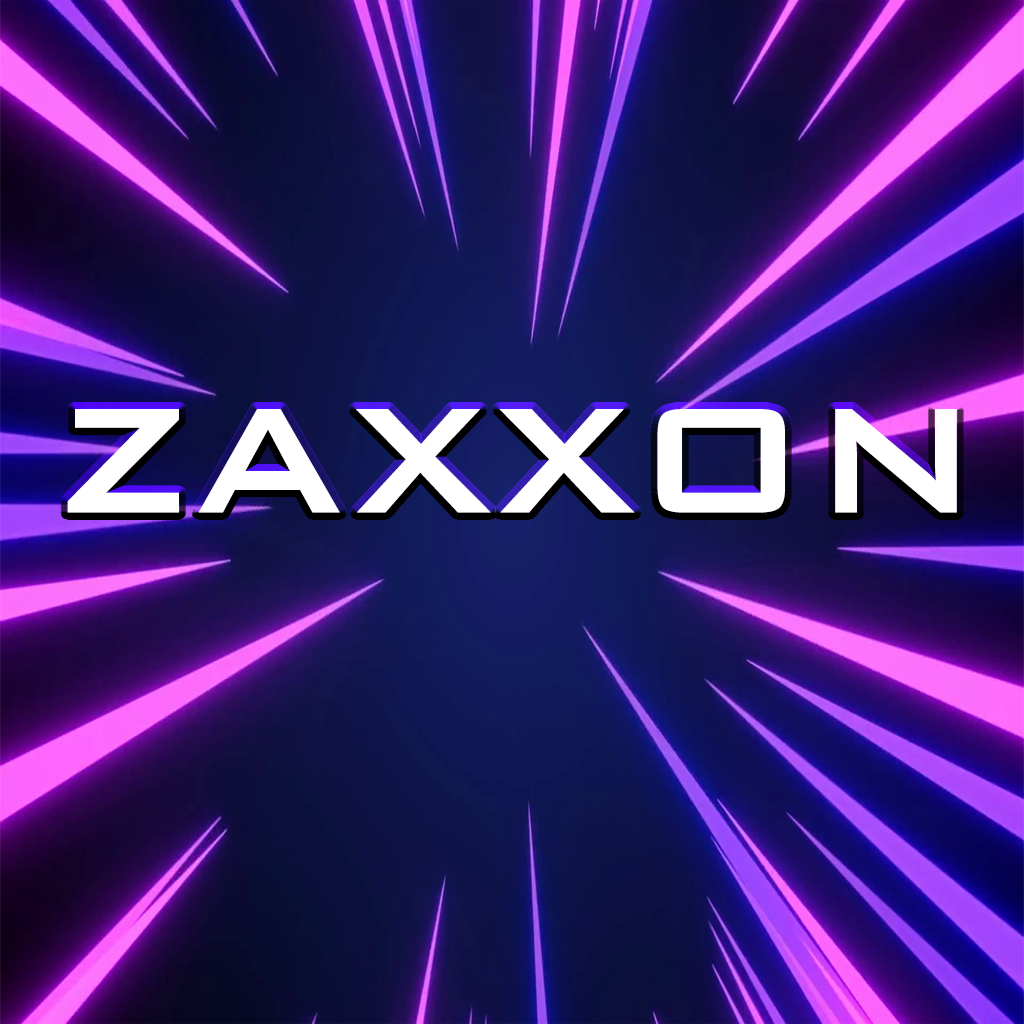
<style>
.page{position:relative;width:1024px;height:1024px}
.page>*{position:absolute;margin:0}
.t1{font:200px "BankGothicBT-Medium";color:#ffffff}
</style>
<div class="page">
<p class="t1" style="left:67px;top:409px;width:890px;height:104px">ZAXXON</p>
</div>
